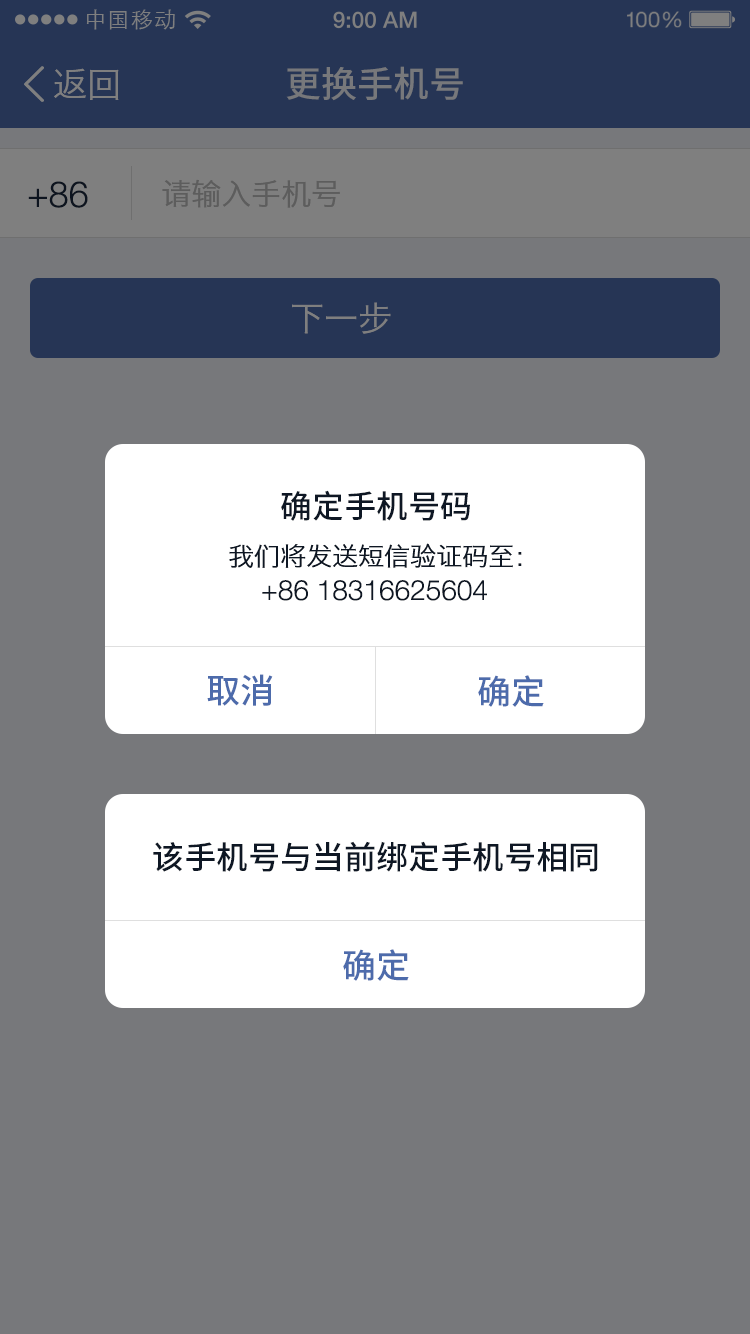
<style>
.page{position:relative;width:750px;height:1334px;background:#77787b}
.page>*{position:absolute;margin:0}
.t1{font:21.9px "STXihei";letter-spacing:0.04em;color:#7f7f7f}
.t2{font:34px "HiraginoSansGB-W3";color:#7f7f7f}
.t3{font:36px "NotoSansHans-Medium";color:#77787b}
.t4{font:36px "HelveticaNeueLTStd-Lt";color:#0d141f}
.t5{font:30px "HiraginoSansGB-W3";color:#5d5d5d}
.t6{font:32px "NotoSansHans-Medium";color:#0e1724}
.t7{font:26px "HiraginoSansGB-W3";color:#0e1724}
.t8{font:28px "HelveticaNeueLTStd-Lt";color:#0e1724}
.t9{font:34px "NotoSansHans-Medium";color:#4d6bab}
</style>
<div class="page">
<p class="t1" style="left:86px;top:9px;width:89px;height:21px">中国移动</p>
<p class="t2" style="left:54px;top:68px;width:65px;height:32px">返回</p>
<p class="t3" style="left:286px;top:66px;width:177px;height:35px">更换手机号</p>
<p class="t4" style="left:28px;top:181px;width:60px;height:27px">+86</p>
<p class="t5" style="left:162px;top:179px;width:178px;height:29px">请输入手机号</p>
<p class="t2" style="left:292px;top:302px;width:99px;height:32px">下一步</p>
<p class="t6" style="left:281px;top:490px;width:189px;height:31px">确定手机号码</p>
<p class="t7" style="left:229px;top:543px;width:293px;height:25px">我们将发送短信验证码至：</p>
<p class="t8" style="left:262px;top:580px;width:225px;height:21px">+86 18316625604</p>
<p class="t9" style="left:207px;top:674px;width:66px;height:32px">取消</p>
<p class="t9" style="left:478px;top:675px;width:66px;height:32px">确定</p>
<p class="t6" style="left:153px;top:841px;width:445px;height:31px">该手机号与当前绑定手机号相同</p>
<p class="t9" style="left:343px;top:949px;width:66px;height:32px">确定</p>
</div>
